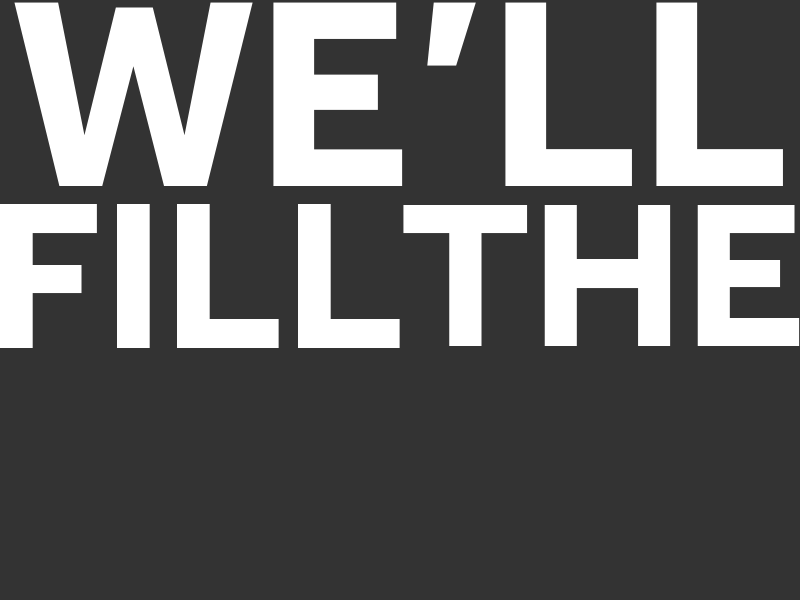
<style>
.page{position:relative;width:800px;height:600px;background:#333333}
.page>*{position:absolute;margin:0}
.t1{font:275.1px "Effra-Bold";color:#ffffff}
.t2{font:216.1px "Effra-Bold";color:#ffffff}
.t3{font:212.4px "Effra-Bold";color:#ffffff}
</style>
<div class="page">
<p class="t1" style="left:14px;top:2px;width:769px;height:184px">WE’LL</p>
<p class="t2" style="left:0px;top:204px;width:400px;height:144px">FILL</p>
<p class="t3" style="left:403px;top:205px;width:397px;height:141px">THE</p>
</div>
